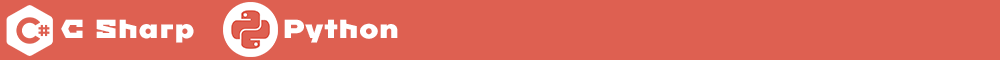
<style>
.page{position:relative;width:1000px;height:60px;background:#de6051}
.page>*{position:absolute;margin:0}
.t1{font:26px "ImperialOne";color:#ffffff}
</style>
<div class="page">
<p class="t1" style="left:61px;top:19px;width:133px;height:24px">C Sharp</p>
<p class="t1" style="left:284px;top:19px;width:114px;height:24px">Python</p>
</div>
